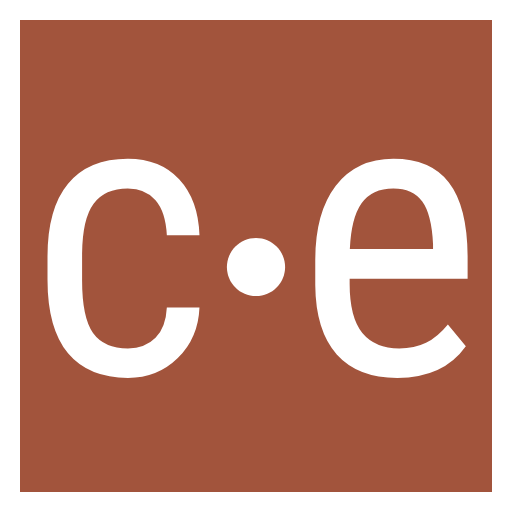
<style>
.page{position:relative;width:512px;height:512px;background:#a2543c}
.page>*{position:absolute;margin:0}
.t1{font:400px "RobotoCondensed-Regular";letter-spacing:0.206em;color:#ffffff}
</style>
<div class="page">
<p class="t1" style="left:47px;top:158px;width:421px;height:220px">ce</p>
</div>
